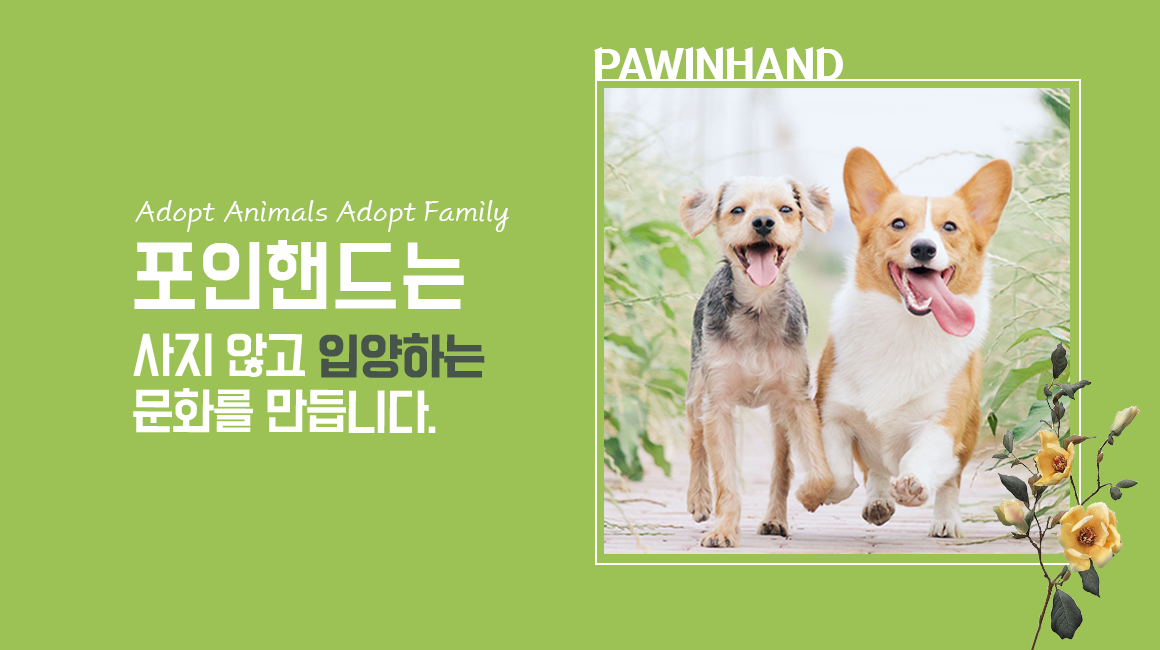
<style>
.page{position:relative;width:1160px;height:650px;background:#9cc255}
.page>*{position:absolute;margin:0}
.t1{font:45px "KOTRA-LEAP";color:#ffffff}
.t2{font:31.8px "KimjungchulScript-Regular";color:#ffffff;scale:0.94 1}
.t3{font:70px "BMDoHyeon";color:#ffffff}
.t4{font:45px/56px "BMDoHyeon";letter-spacing:-0.06em;color:#ffffff}
.t5{font:45px/56px "BMDoHyeon";letter-spacing:-0.06em;color:#475449;font-weight:bold}
</style>
<div class="page">
<p class="t1" style="left:593px;top:47px;width:250px;height:33px">PAWINHAND</p>
<p class="t2" style="left:135px;top:200px;width:374px;height:32px">Adopt Animals Adopt Family</p>
<p class="t3" style="left:134px;top:240px;width:330px;height:69px">포인핸드는</p>
<p class="t4" style="left:133px;top:333px;width:352px;height:100px">사지 않고 <span class="t5">입양하는<br></span>문화를 만듭니다.</p>
</div>
